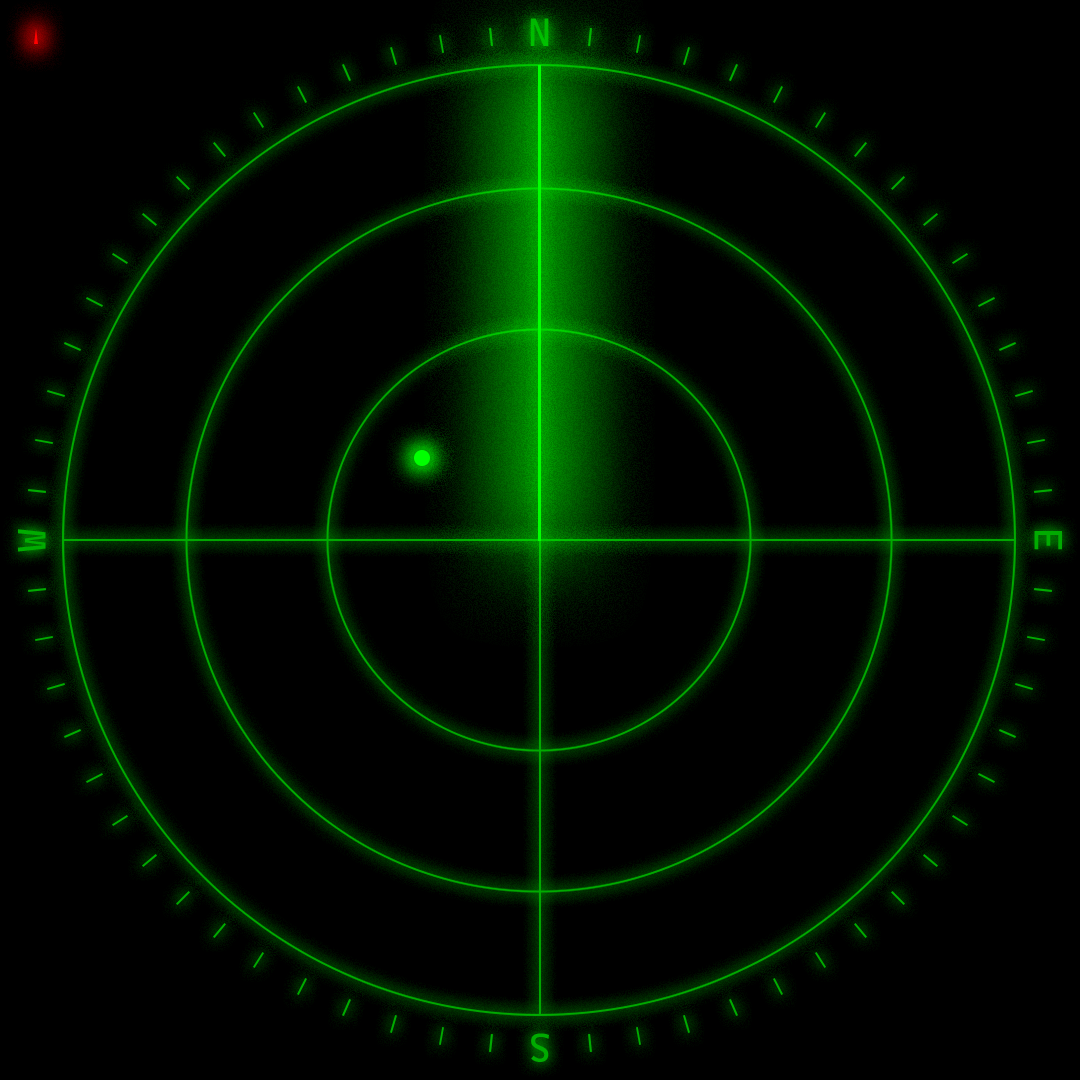
<style>
.page{position:relative;width:1080px;height:1080px;background:#000000}
.page>*{position:absolute;margin:0}
.t1{font:39.4px "CascadiaMono-Roman";color:#00bb00}
.t2{font:39.4px "CascadiaMono-Roman";color:#00ab00}
</style>
<div class="page">
<p class="t1" style="left:530px;top:18px;width:19px;height:28px">N</p>
<p class="t2" style="left:18px;top:529px;width:28px;height:23px;rotate:-90deg">W</p>
<p class="t2" style="left:1034px;top:531px;width:28px;height:19px;rotate:90deg">E</p>
<p class="t2" style="left:531px;top:1033px;width:18px;height:29px;rotate:180deg">S</p>
</div>
